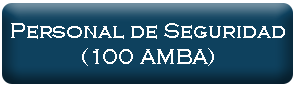
<style>
.page{position:relative;width:295px;height:85px;background:#0e415e}
.page>*{position:absolute;margin:0}
.t1{font:22px "CopperplateGothic-Light";color:#ffffff}
</style>
<div class="page">
<p class="t1" style="left:11px;top:23px;width:274px;height:43px;text-align:center">Personal de Seguridad<br>(100 AMBA)</p>
</div>
